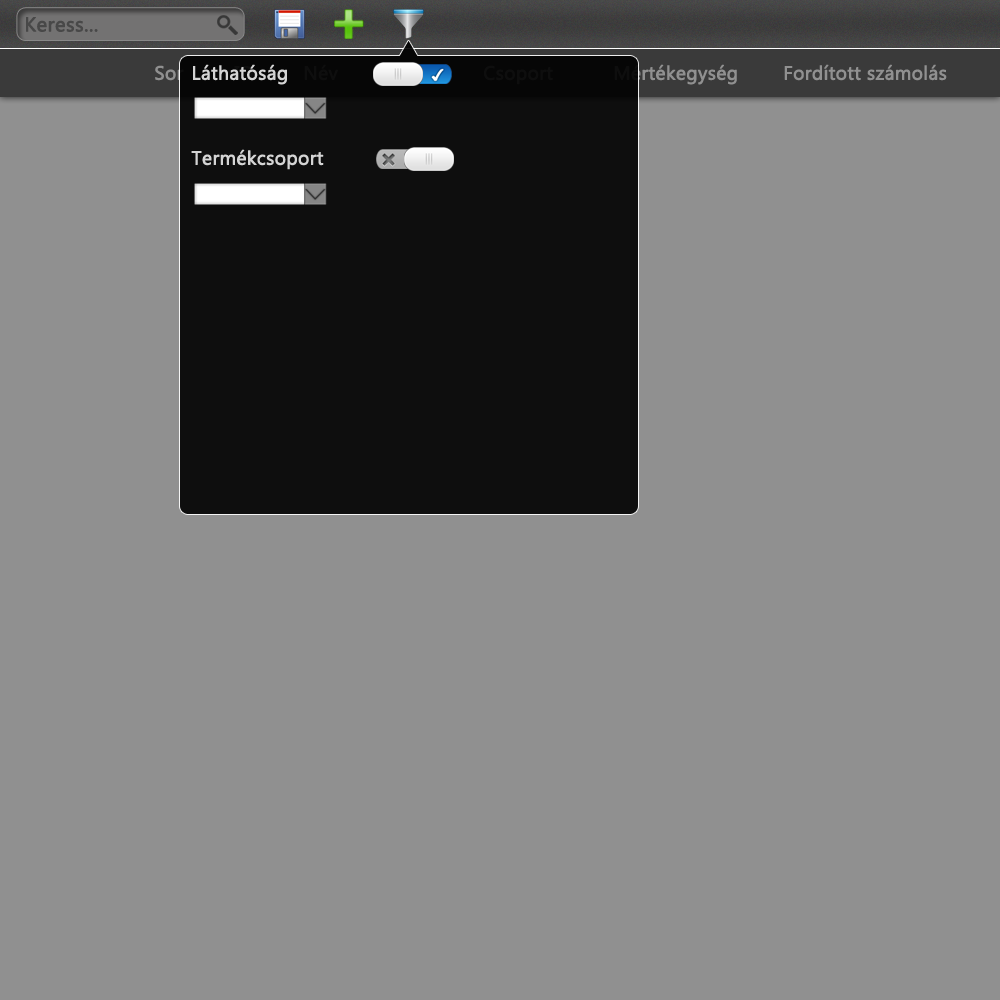
<style>
.page{position:relative;width:1000px;height:1000px;background:#909090}
.page>*{position:absolute;margin:0}
.t1{font:20px "MyanmarText";color:#484848;font-weight:bold}
.t2{font:19px "MyanmarText";color:#909090;font-weight:bold}
.t3{font:19px "MyanmarText";color:#d4d4d4;font-weight:bold}
.t4{font:19px "MyanmarText";color:#0e0e0e;font-weight:bold}
</style>
<div class="page">
<p class="t1" style="left:26px;top:17px;width:72px;height:15px">Keress...</p>
<p class="t2" style="left:155px;top:65px;width:29px;height:16px">Sor</p>
<p class="t3" style="left:193px;top:64px;width:94px;height:21px">Láthatóság</p>
<p class="t4" style="left:304px;top:64px;width:34px;height:17px">Név</p>
<p class="t4" style="left:484px;top:65px;width:69px;height:20px">Csoport</p>
<p class="t2" style="left:614px;top:64px;width:123px;height:21px">Mértékegység</p>
<p class="t2" style="left:784px;top:64px;width:163px;height:17px">Fordított számolás</p>
<p class="t3" style="left:191px;top:149px;width:133px;height:21px">Termékcsoport</p>
</div>
